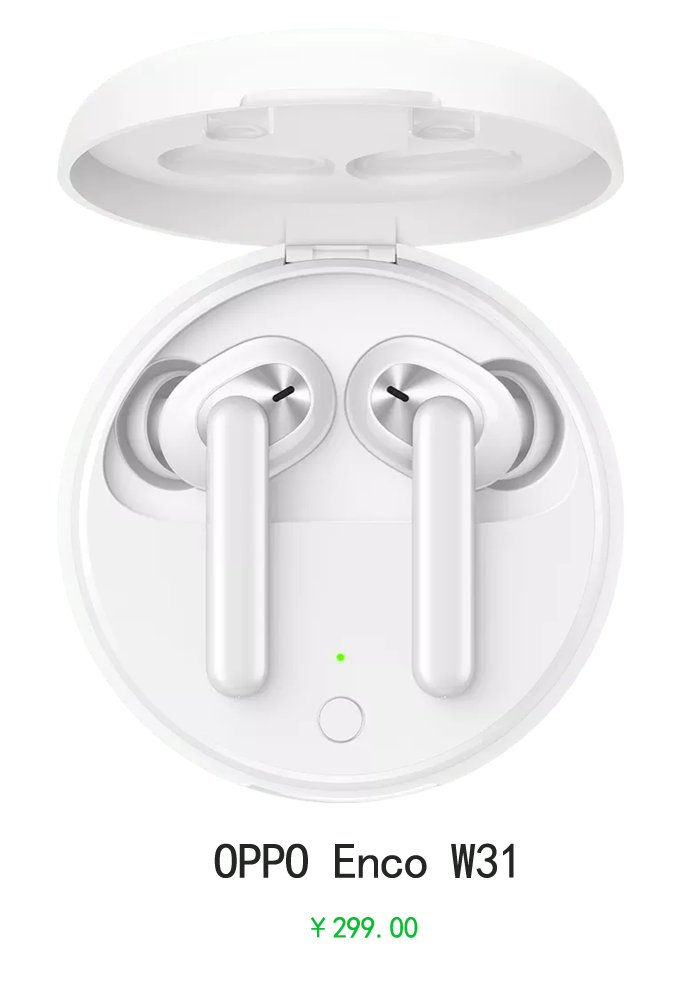
<style>
.page{position:relative;width:680px;height:1000px;background:#ffffff}
.page>*{position:absolute;margin:0}
.t1{font:50px "KaiTi";letter-spacing:-0.025em;color:#242624}
.t2{font:30px "KaiTi";letter-spacing:-0.025em;color:#07bf2f}
</style>
<div class="page">
<p class="t1" style="left:214px;top:843px;width:300px;height:35px">OPPO Enco W31</p>
<p class="t2" style="left:311px;top:917px;width:107px;height:21px">￥299.00</p>
</div>
